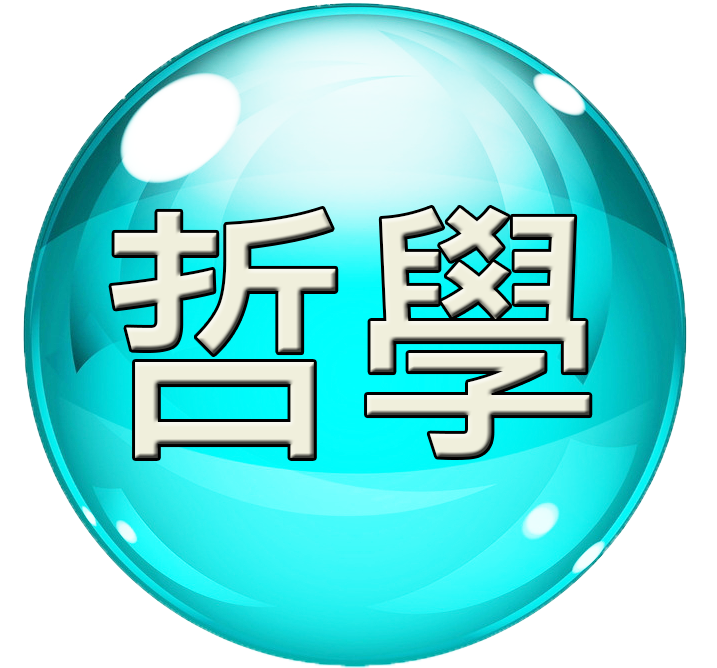
<style>
.page{position:relative;width:717px;height:668px;background:#ffffff}
.page>*{position:absolute;margin:0}
.t1{font:283.1px "MicrosoftJhengHeiBold";color:#f0efdc;scale:0.9 1}
</style>
<div class="page">
<p class="t1" style="left:111px;top:207px;width:479px;height:251px">哲學</p>
</div>
